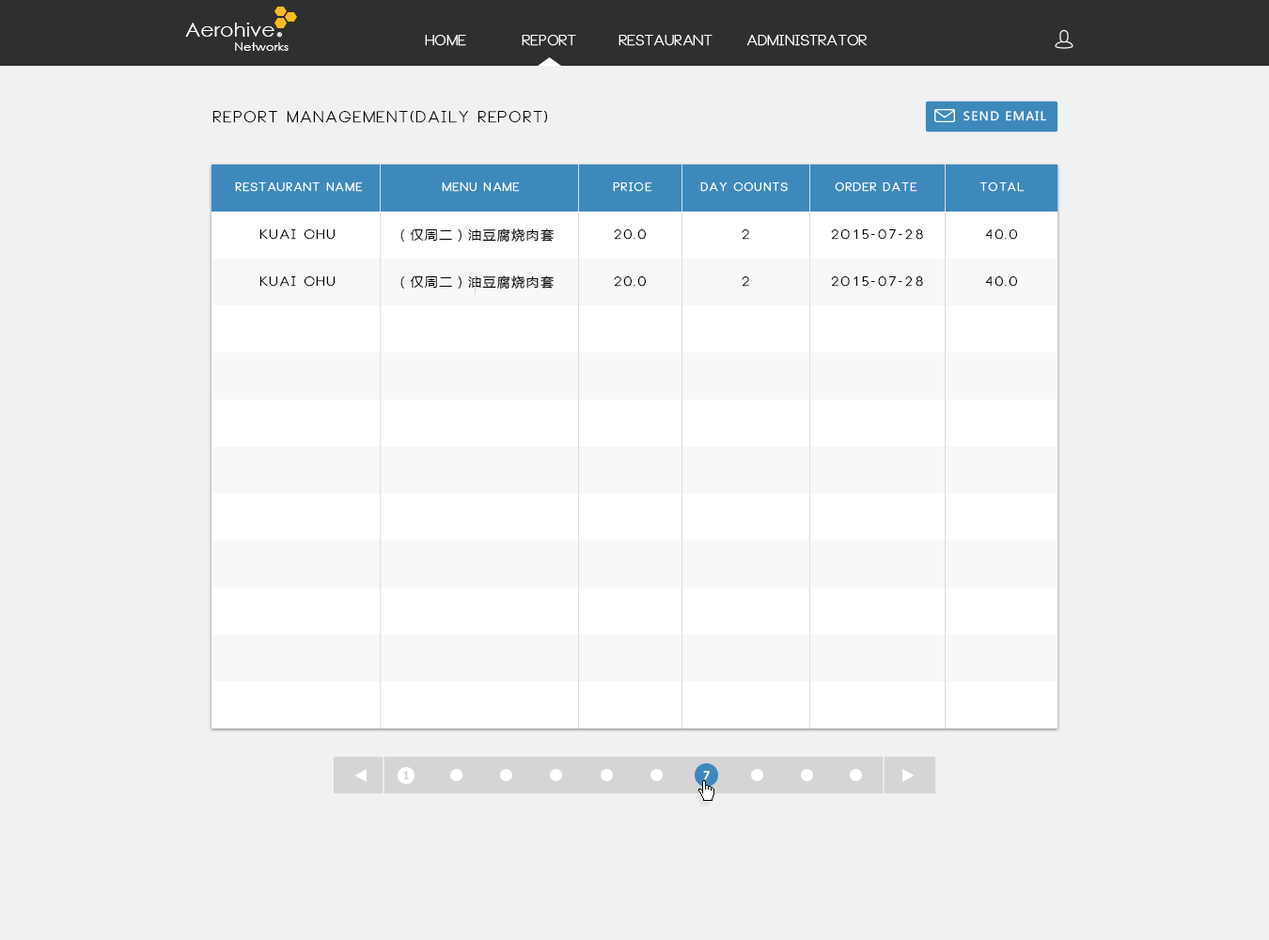
<style>
.page{position:relative;width:1269px;height:940px;background:#f1f1f1}
.page>*{position:absolute;margin:0}
.t1{font:19.3px "CenturyGothic";color:#ffffff;scale:1.07 1}
.t2{font:5.8px "CenturyGothic";color:#ffffff;scale:1.07 1}
.t3{font:14.1px "Neou-Thin";color:#ffffff;font-weight:bold}
.t4{font:11.6px "CenturyGothic";color:#ffffff;scale:1.07 1}
.t5{font:15px "Neou-Thin";letter-spacing:0.1em;color:#010101;font-weight:bold}
.t6{font:11.8px "MicrosoftYaHei";letter-spacing:0.1em;color:#feffff}
.t7{font:11.3px "Neou-Thin";letter-spacing:0.1em;color:#ffffff;font-weight:bold}
.t8{font:13.2px "Neou-Thin";letter-spacing:0.1em;color:#000000;font-weight:bold}
.t9{font:13.2px "MicrosoftYaHei";letter-spacing:0.1em;color:#000000}
.t10{font:11.3px "Lato-Bold";color:#d0d3d7;text-transform:uppercase}
.t11{font:12.2px "MyriadPro-Regular";color:#ffffff;text-transform:uppercase;font-weight:bold}
</style>
<div class="page">
<p class="t1" style="left:185px;top:23px;width:89px;height:14px">Aerohive</p>
<p class="t2" style="left:276px;top:32px;width:6px;height:6px">®</p>
<p class="t3" style="left:425px;top:35px;width:41px;height:11px">Home</p>
<p class="t3" style="left:522px;top:35px;width:54px;height:11px">Report</p>
<p class="t3" style="left:618px;top:35px;width:94px;height:11px">Restaurant</p>
<p class="t3" style="left:746px;top:35px;width:121px;height:11px">Administrator</p>
<p class="t4" style="left:235px;top:42px;width:54px;height:9px">Networks</p>
<p class="t5" style="left:212px;top:111px;width:335px;height:12px">Report Management(Daily Report)</p>
<p class="t6" style="left:963px;top:111px;width:83px;height:10px">SEND EMAIL</p>
<p class="t6" style="left:963px;top:111px;width:83px;height:10px">SEND EMAIL</p>
<p class="t7" style="left:235px;top:182px;width:128px;height:10px">Restaurant name</p>
<p class="t7" style="left:442px;top:182px;width:78px;height:10px">menu name</p>
<p class="t7" style="left:613px;top:182px;width:39px;height:10px">price</p>
<p class="t7" style="left:700px;top:182px;width:88px;height:10px">day counts</p>
<p class="t7" style="left:835px;top:182px;width:82px;height:10px">order date</p>
<p class="t7" style="left:979px;top:182px;width:45px;height:10px">total</p>
<p class="t8" style="left:259px;top:229px;width:76px;height:11px">Kuai Chu</p>
<p class="t9" style="left:400px;top:228px;width:154px;height:14px">（仅周二）油豆腐烧肉套餐</p>
<p class="t8" style="left:614px;top:229px;width:32px;height:11px">20.0</p>
<p class="t8" style="left:742px;top:229px;width:7px;height:11px">2</p>
<p class="t8" style="left:831px;top:229px;width:92px;height:11px">2015-07-28</p>
<p class="t8" style="left:985px;top:229px;width:32px;height:11px">40.0</p>
<p class="t8" style="left:259px;top:276px;width:76px;height:11px">Kuai Chu</p>
<p class="t9" style="left:400px;top:275px;width:154px;height:14px">（仅周二）油豆腐烧肉套餐</p>
<p class="t8" style="left:614px;top:276px;width:32px;height:11px">20.0</p>
<p class="t8" style="left:742px;top:276px;width:7px;height:11px">2</p>
<p class="t8" style="left:831px;top:276px;width:92px;height:11px">2015-07-28</p>
<p class="t8" style="left:985px;top:276px;width:32px;height:11px">40.0</p>
<p class="t10" style="left:403px;top:771px;width:6px;height:8px">1</p>
<p class="t11" style="left:703px;top:771px;width:7px;height:9px">7</p>
</div>
